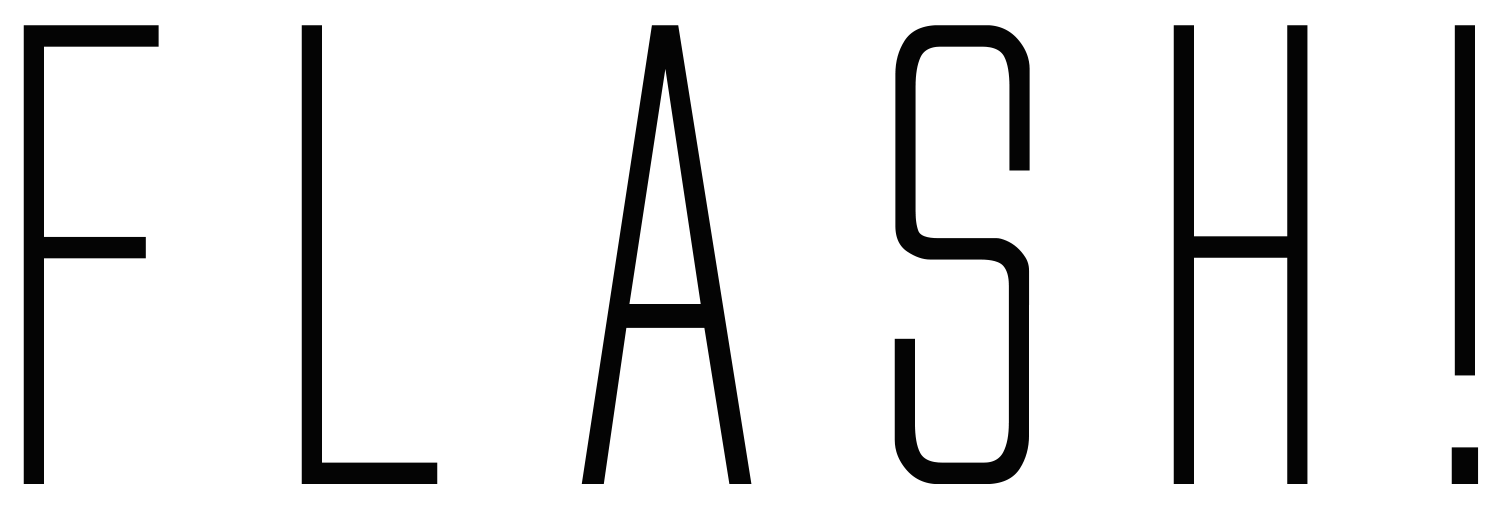
<style>
.page{position:relative;width:1500px;height:509px;background:#ffffff}
.page>*{position:absolute;margin:0}
.t1{font:610px "AlienLeague";color:#040404}
</style>
<div class="page">
<p class="t1" style="left:23px;top:25px;width:1456px;height:459px">FLASH!</p>
</div>
